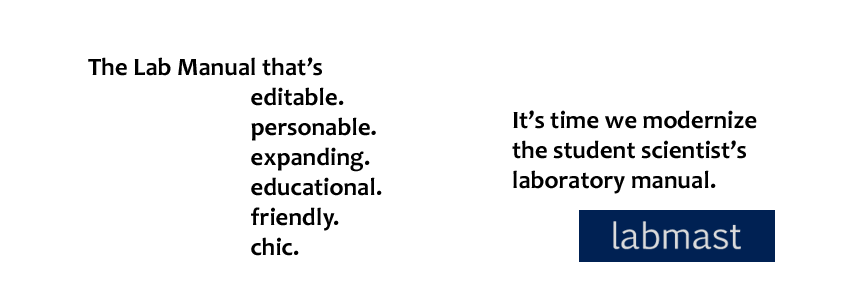
<style>
.page{position:relative;width:850px;height:300px;background:#ffffff}
.page>*{position:absolute;margin:0}
.t1{font:25px "Candara-Bold";color:#000000}
</style>
<div class="page">
<p class="t1" style="left:88px;top:57px;width:294px;height:199px">The Lab Manual that’s<br>                              editable.<br>                              personable.<br>                              expanding.<br>                              educational.<br>                              friendly.<br>                              chic.</p>
<p class="t1" style="left:512px;top:110px;width:245px;height:84px">It’s time we modernize<br>the student scientist’s<br>laboratory manual.</p>
</div>
